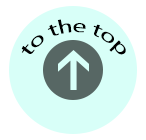
<style>
.page{position:relative;width:146px;height:140px;background:#d8fff8}
.page>*{position:absolute;margin:0}
.t1{font:18px "MicrosoftNewTaiLue";color:#000000}
</style>
<div class="page">
<p class="t1" style="left:21px;top:19px;width:105px;height:36px;text-align:center">to the top</p>
</div>
